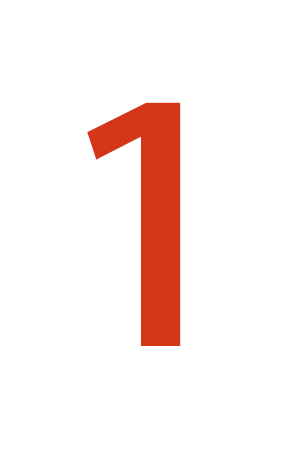
<style>
.page{position:relative;width:300px;height:450px;background:#ffffff}
.page>*{position:absolute;margin:0}
.t1{font:322.9px "AdobeFanHeitiStd-Bold";color:#d53518;scale:1.07 1}
</style>
<div class="page">
<p class="t1" style="left:87px;top:102px;width:94px;height:244px">1</p>
</div>
